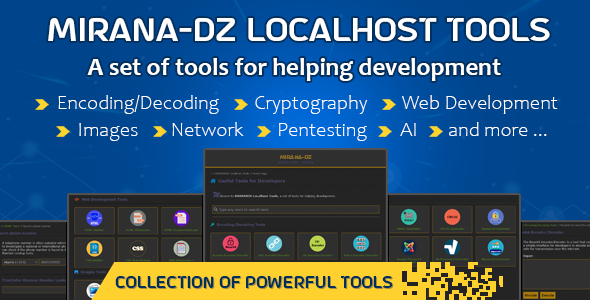
<style>
.page{position:relative;width:590px;height:300px}
.page>*{position:absolute;margin:0}
.t1{font:30px "aAstroSpace";color:#ffffff}
.t2{font:25px "Candara-Bold";color:#ffffff}
.t3{font:20px "Candara-Light";color:#ffffff}
.t4{font:5px "aAstroSpace";color:#846828}
.t5{font:15px "aAstroSpace";color:#012f5b}
.t6{font:15px "aAstroSpace"}
</style>
<div class="page">
<p class="t1" style="left:48px;top:18px;width:502px;height:24px">MIRANA-DZ LOCALHOST TOOLS</p>
<p class="t2" style="left:87px;top:58px;width:414px;height:23px">A set of tools for helping development</p>
<p class="t3" style="left:58px;top:95px;width:161px;height:19px">Encoding/Decoding</p>
<p class="t3" style="left:255px;top:95px;width:113px;height:19px">Cryptography</p>
<p class="t3" style="left:402px;top:95px;width:156px;height:19px">Web Development</p>
<p class="t3" style="left:79px;top:123px;width:59px;height:18px">Images</p>
<p class="t3" style="left:172px;top:122px;width:72px;height:14px">Network</p>
<p class="t3" style="left:279px;top:123px;width:88px;height:18px">Pentesting</p>
<p class="t3" style="left:400px;top:123px;width:16px;height:13px">AI</p>
<p class="t3" style="left:449px;top:122px;width:98px;height:14px">and more ...</p>
<p class="t4" style="left:280px;top:155px;width:32px;height:4px">MIRANA-DZ</p>
<p class="t5" style="left:115px;top:276px;width:278px;height:12px">collection of powerful tools</p>
<p class="t6" style="left:116px;top:277px;width:278px;height:12px">collection of powerful tools</p>
</div>
